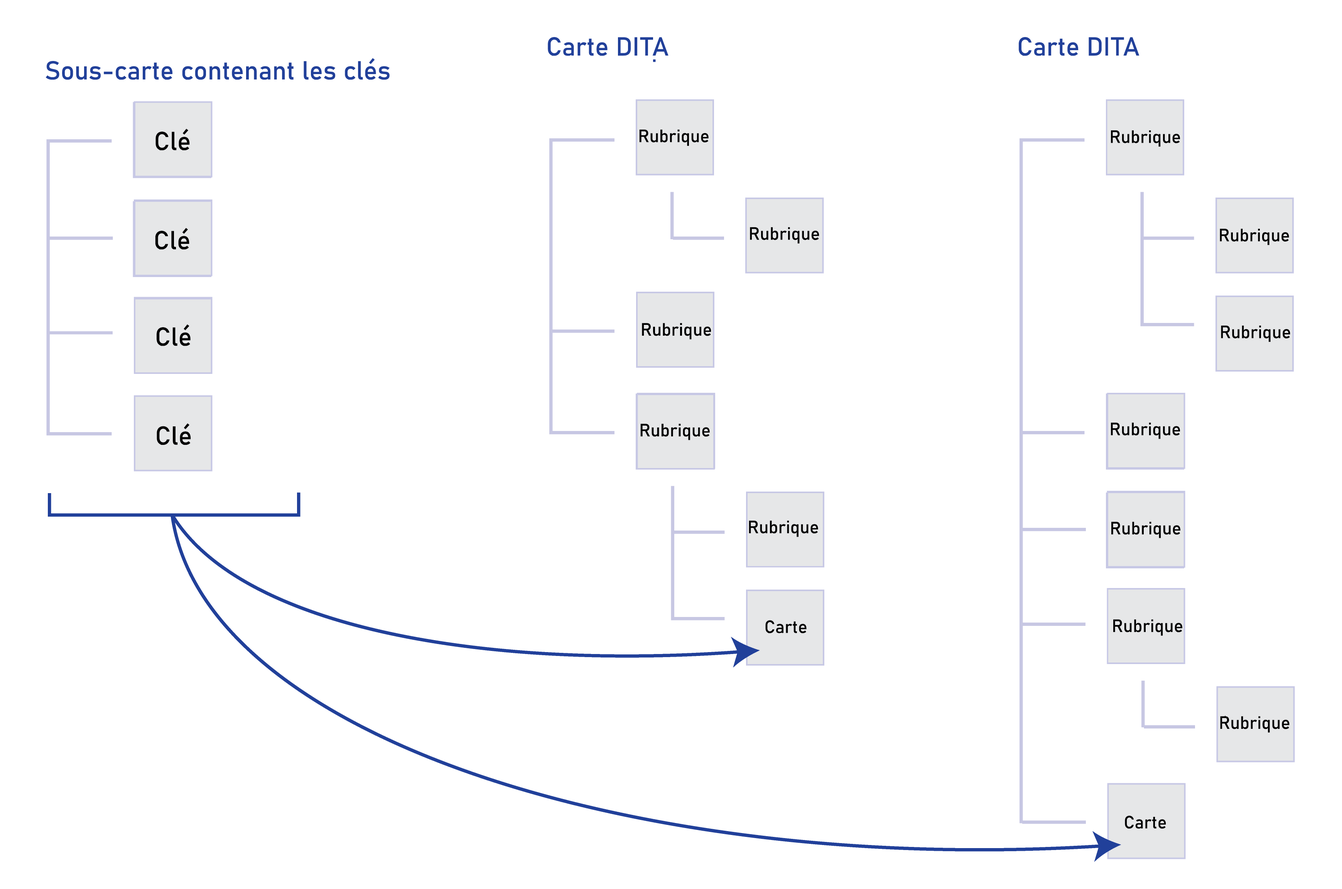
<style>
.page{position:relative;width:1342px;height:889px;background:#ffffff}
.page>*{position:absolute;margin:0}
.t1{font:25.7px "Bahnschrift";color:#21409a}
.t2{font:25.7px "Bahnschrift";color:#000000}
.t3{font:17.7px "Bahnschrift";color:#000000}
</style>
<div class="page">
<p class="t1" style="left:548px;top:37px;width:120px;height:19px">Carte DITA</p>
<p class="t1" style="left:1019px;top:37px;width:120px;height:19px">Carte DITA</p>
<p class="t1" style="left:46px;top:58px;width:344px;height:22px">Sous-carte contenant les clés</p>
<p class="t2" style="left:155px;top:128px;width:35px;height:22px">Clé</p>
<p class="t3" style="left:639px;top:129px;width:70px;height:17px">Rubrique</p>
<p class="t3" style="left:1111px;top:130px;width:69px;height:17px">Rubrique</p>
<p class="t2" style="left:155px;top:228px;width:34px;height:22px">Clé</p>
<p class="t3" style="left:750px;top:227px;width:69px;height:16px">Rubrique</p>
<p class="t3" style="left:1220px;top:228px;width:69px;height:17px">Rubrique</p>
<p class="t2" style="left:157px;top:324px;width:34px;height:22px">Clé</p>
<p class="t3" style="left:642px;top:323px;width:69px;height:16px">Rubrique</p>
<p class="t3" style="left:1221px;top:325px;width:69px;height:17px">Rubrique</p>
<p class="t2" style="left:157px;top:423px;width:34px;height:22px">Clé</p>
<p class="t3" style="left:640px;top:423px;width:70px;height:17px">Rubrique</p>
<p class="t3" style="left:1111px;top:422px;width:69px;height:17px">Rubrique</p>
<p class="t3" style="left:749px;top:520px;width:69px;height:17px">Rubrique</p>
<p class="t3" style="left:1111px;top:521px;width:69px;height:17px">Rubrique</p>
<p class="t3" style="left:765px;top:620px;width:41px;height:13px">Carte</p>
<p class="t3" style="left:1113px;top:619px;width:69px;height:17px">Rubrique</p>
<p class="t3" style="left:1220px;top:716px;width:69px;height:16px">Rubrique</p>
<p class="t3" style="left:1125px;top:815px;width:41px;height:13px">Carte</p>
</div>
